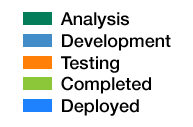
<style>
.page{position:relative;width:193px;height:127px;background:#ffffff}
.page>*{position:absolute;margin:0}
.t1{font:18px "HelveticaNeue-Medium";color:#000000}
</style>
<div class="page">
<p class="t1" style="left:60px;top:12px;width:111px;height:104px">Analysis<br>Development<br>Testing<br>Completed<br>Deployed</p>
</div>
